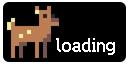
<style>
.page{position:relative;width:128px;height:64px;background:#000000}
.page>*{position:absolute;margin:0}
.t1{font:17px "EASVHS";color:#ffffff}
</style>
<div class="page">
<p class="t1" style="left:56px;top:38px;width:59px;height:17px">loading</p>
</div>
